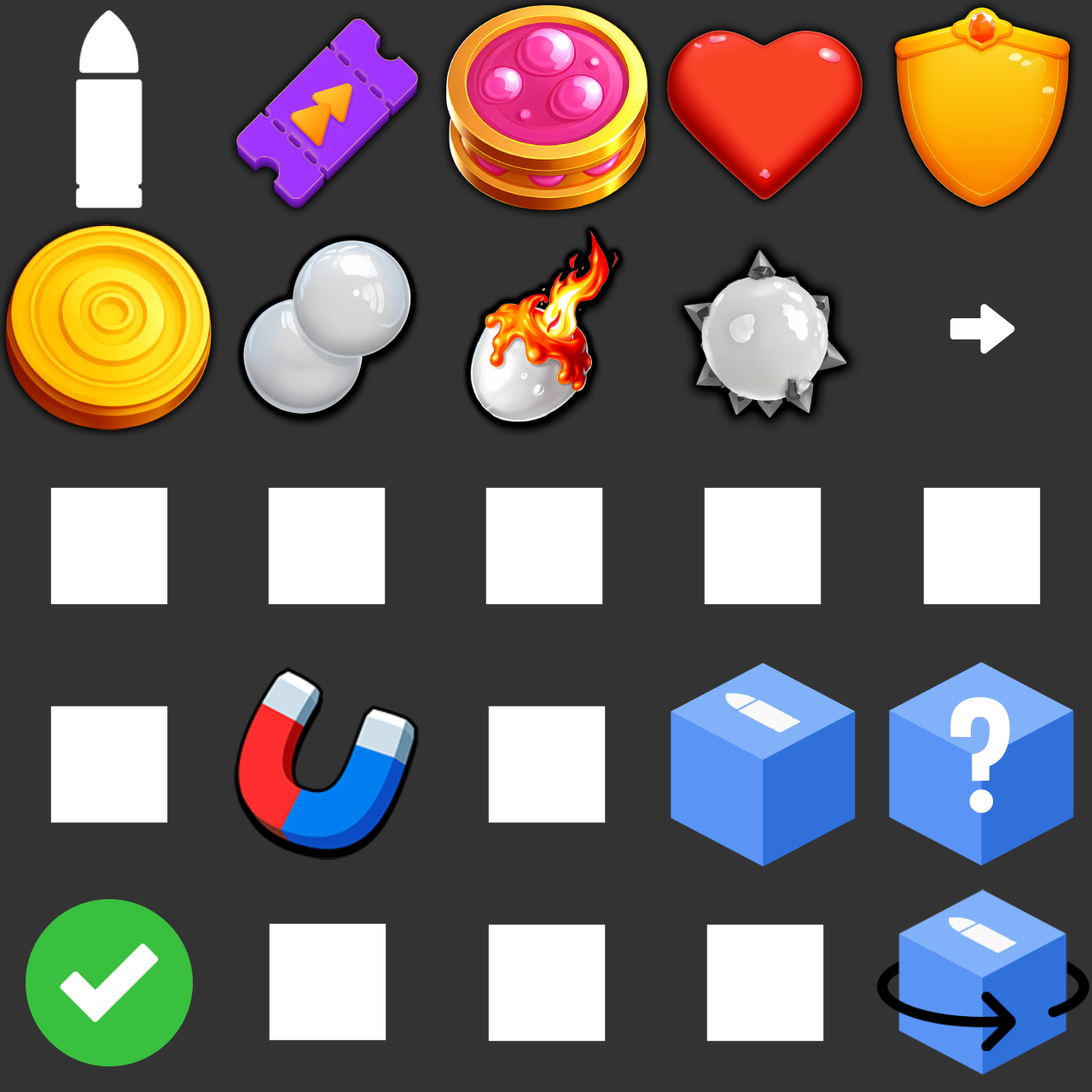
<style>
.page{position:relative;width:1092px;height:1092px;background:#333333}
.page>*{position:absolute;margin:0}
.t1{font:162.9px "DimboRegular";color:#ffffff}
</style>
<div class="page">
<p class="t1" style="left:950px;top:697px;width:60px;height:116px">?</p>
</div>
